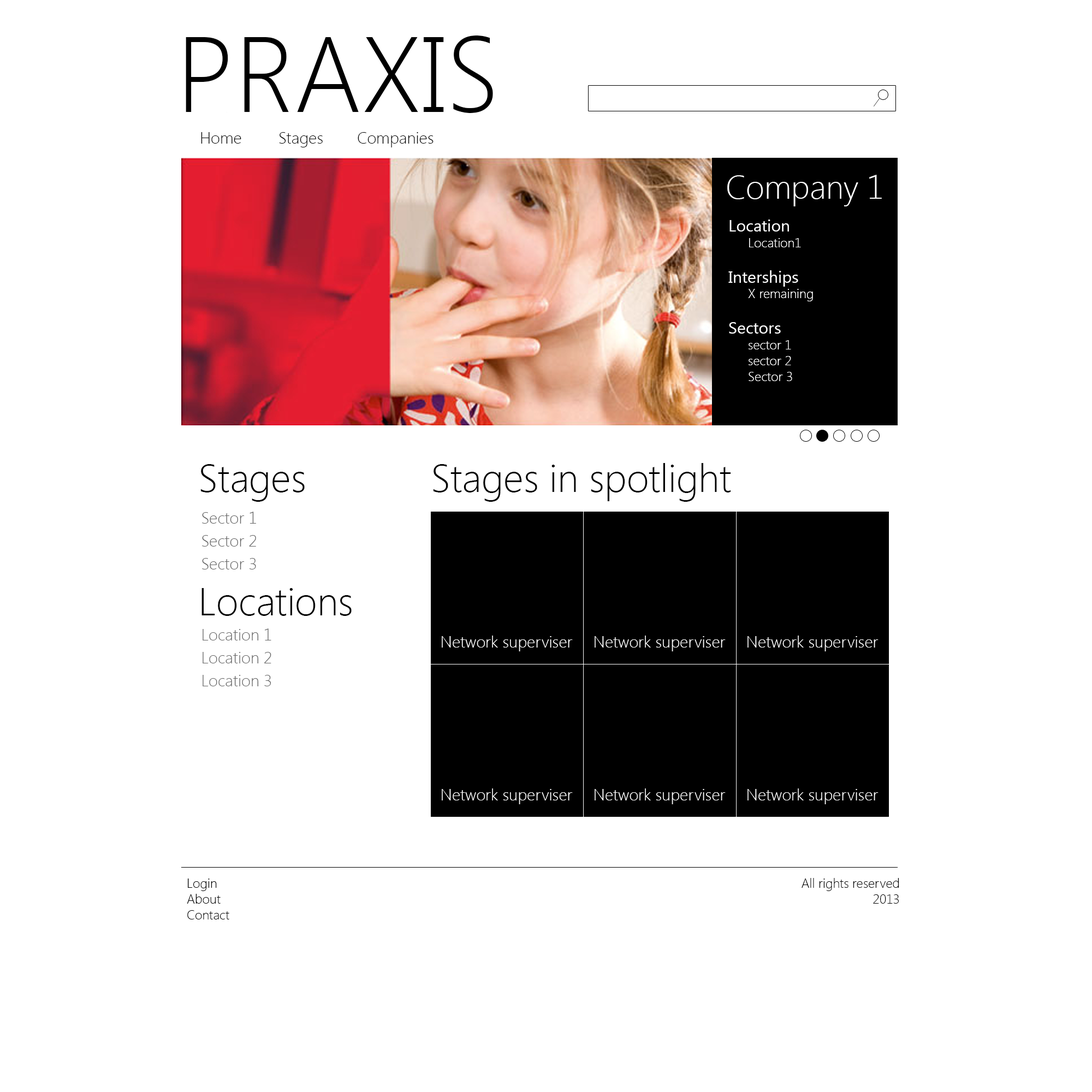
<style>
.page{position:relative;width:1092px;height:1092px;background:#ffffff}
.page>*{position:absolute;margin:0}
.t1{font:106.9px "SegoeUI-Light";color:#000000}
.t2{font:16.4px "SegoeUI-Light";color:#000000}
.t3{font:32.8px "SegoeUI-Light";color:#ffffff}
.t4{font:13.1px "SegoeUI-Light";color:#ffffff}
.t5{font:16.4px "SegoeUI";color:#ffffff}
.t6{font:39.3px "SegoeUI-Light";color:#000000}
.t7{font:16.4px "SegoeUI-Light";color:#666666}
.t8{font:16.4px "SegoeUI-Light";color:#ffffff}
.t9{font:13.1px "SegoeUI-Light";color:#000000}
</style>
<div class="page">
<p class="t1" style="left:186px;top:35px;width:307px;height:78px">PRAXIS</p>
<p class="t2" style="left:201px;top:132px;width:233px;height:15px">Home  Stages   Companies</p>
<p class="t3" style="left:727px;top:175px;width:155px;height:31px">Company 1</p>
<p class="t4" style="left:728px;top:219px;width:85px;height:162px"><span class="t5">Location<br></span> Location1<br><br><span class="t5">Interships<br></span> X remaining<br><br><span class="t5">Sectors<br></span> sector 1<br> sector 2<br> Sector 3</p>
<p class="t6" style="left:200px;top:464px;width:105px;height:38px">Stages</p>
<p class="t6" style="left:433px;top:463px;width:298px;height:39px">Stages in spotlight</p>
<p class="t7" style="left:202px;top:512px;width:54px;height:12px">Sector 1</p>
<p class="t7" style="left:202px;top:535px;width:54px;height:12px">Sector 2</p>
<p class="t7" style="left:202px;top:558px;width:54px;height:11px">Sector 3</p>
<p class="t6" style="left:201px;top:588px;width:151px;height:28px">Locations</p>
<p class="t7" style="left:203px;top:628px;width:68px;height:12px">Location 1</p>
<p class="t8" style="left:442px;top:636px;width:131px;height:15px">Network superviser</p>
<p class="t8" style="left:595px;top:636px;width:131px;height:15px">Network superviser</p>
<p class="t8" style="left:747px;top:636px;width:132px;height:15px">Network superviser</p>
<p class="t7" style="left:203px;top:652px;width:68px;height:11px">Location 2</p>
<p class="t7" style="left:203px;top:675px;width:68px;height:11px">Location 3</p>
<p class="t8" style="left:442px;top:788px;width:131px;height:16px">Network superviser</p>
<p class="t8" style="left:595px;top:788px;width:131px;height:16px">Network superviser</p>
<p class="t8" style="left:747px;top:788px;width:132px;height:16px">Network superviser</p>
<p class="t9" style="left:187px;top:879px;width:42px;height:40px">Login<br>About<br>Contact</p>
<p class="t9" style="left:802px;top:878px;width:97px;height:26px;text-align:right">All rights reserved<br>2013</p>
</div>
